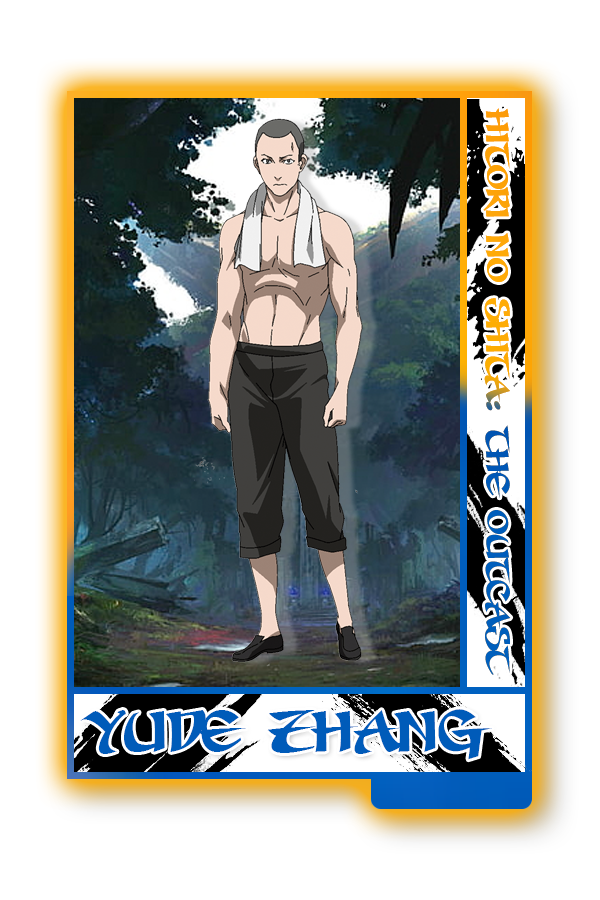
<style>
.page{position:relative;width:600px;height:900px;background:#ffffff}
.page>*{position:absolute;margin:0}
.t1{font:36.7px "SevenSwordsmenBB"}
.t2{font:64.5px "SevenSwordsmenBB";color:#005bb9}
</style>
<div class="page">
<p class="t1" style="left:483px;top:108px;width:28px;height:567px;rotate:90deg">HITORI NO SHITA: THE OUTCAST</p>
<p class="t2" style="left:80px;top:709px;width:412px;height:51px">Yude Zhang</p>
</div>
